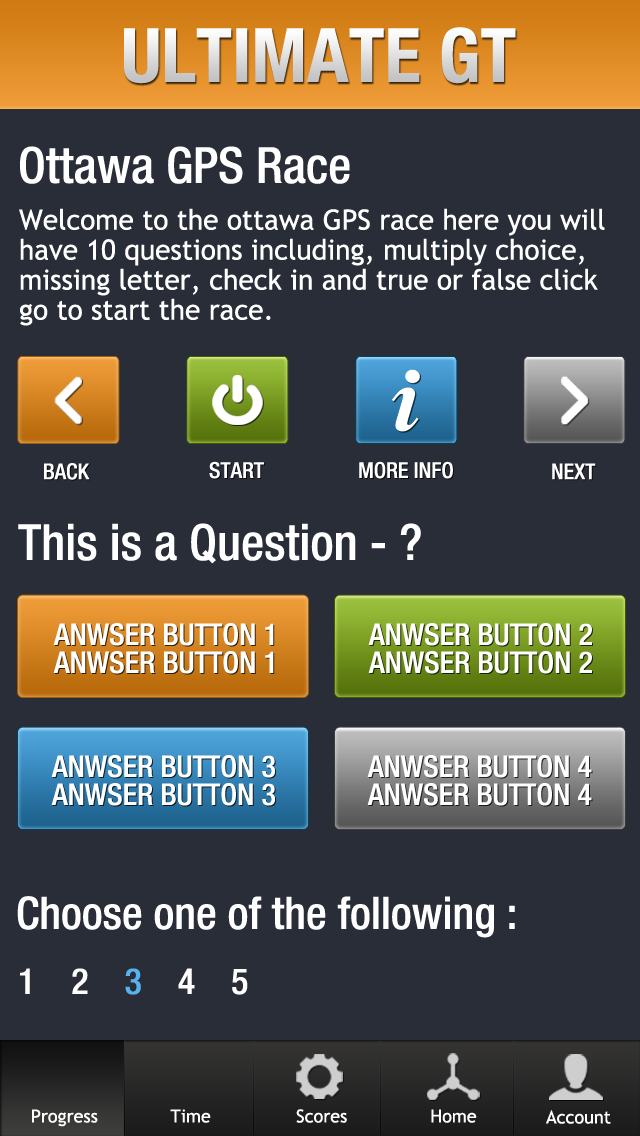
<style>
.page{position:relative;width:640px;height:1136px;background:#292d38}
.page>*{position:absolute;margin:0}
.t1{font:75px "HelveticaNeue-BoldCond"}
.t2{font:50px "HelveticaNeue-MediumCond";color:#ffffff}
.t3{font:28px/30px "TrebuchetMS";color:#ffffff}
.t4{font:22px "HelveticaNeue-MediumCond";color:#ffffff}
.t5{font:30px/28px "HelveticaNeue-MediumCond";color:#ffffff}
.t6{font:45px "HelveticaNeue-MediumCond";color:#ffffff}
.t7{font:36px "HelveticaNeue-MediumCond";letter-spacing:0.38em;color:#ffffff}
.t8{font:36px "HelveticaNeue-MediumCond";letter-spacing:0.38em;color:#57b3ee}
.t9{font:18px "TrebuchetMS";color:#ffffff}
</style>
<div class="page">
<p class="t1" style="left:124px;top:27px;width:392px;height:57px">ULTIMATE GT</p>
<p class="t2" style="left:20px;top:146px;width:330px;height:38px">Ottawa GPS Race</p>
<p class="t3" style="left:19px;top:208px;width:586px;height:118px">Welcome to the ottawa GPS race here you will have 10 questions including, multiply choice, missing letter, check in and true or false click go to start the race.</p>
<p class="t4" style="left:209px;top:461px;width:55px;height:18px">START</p>
<p class="t4" style="left:359px;top:461px;width:94px;height:18px">MORE INFO</p>
<p class="t4" style="left:44px;top:463px;width:46px;height:17px">BACK</p>
<p class="t4" style="left:552px;top:463px;width:44px;height:17px">NEXT</p>
<p class="t2" style="left:18px;top:523px;width:403px;height:41px">This is a Question - ?</p>
<p class="t5" style="left:53px;top:623px;width:221px;height:51px;text-align:center">ANWSER BUTTON 1<br>ANWSER BUTTON 1</p>
<p class="t5" style="left:368px;top:623px;width:224px;height:51px;text-align:center">ANWSER BUTTON 2<br>ANWSER BUTTON 2</p>
<p class="t5" style="left:51px;top:755px;width:224px;height:51px;text-align:center">ANWSER BUTTON 3<br>ANWSER BUTTON 3</p>
<p class="t5" style="left:367px;top:755px;width:225px;height:51px;text-align:center">ANWSER BUTTON 4<br>ANWSER BUTTON 4</p>
<p class="t6" style="left:17px;top:896px;width:498px;height:42px">Choose one of the following :</p>
<p class="t7" style="left:20px;top:968px;width:228px;height:27px">1 2 <span class="t8">3</span> 4 5</p>
<p class="t9" style="left:32px;top:1109px;width:66px;height:18px">Progress</p>
<p class="t9" style="left:170px;top:1109px;width:41px;height:14px">Time</p>
<p class="t9" style="left:296px;top:1109px;width:51px;height:14px">Scores</p>
<p class="t9" style="left:431px;top:1109px;width:46px;height:14px">Home</p>
<p class="t9" style="left:546px;top:1110px;width:65px;height:14px">Account</p>
</div>
